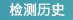
<style>
.page{position:relative;width:73px;height:20px}
.page>*{position:absolute;margin:0}
.t1{font:14px "LiHeiPro";color:#ffffff}
</style>
<div class="page">
<p class="t1" style="left:9px;top:3px;width:56px;height:14px">检测历史</p>
</div>
